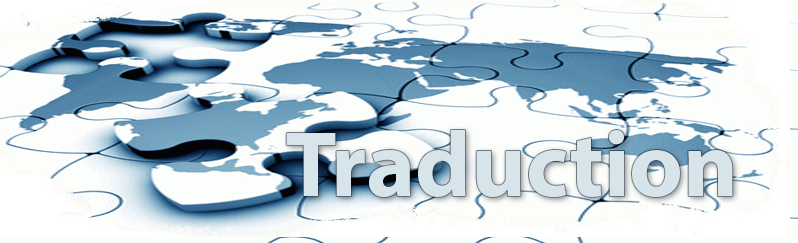
<style>
.page{position:relative;width:798px;height:243px;background:#fcfefc}
.page>*{position:absolute;margin:0}
.t1{font:93.7px "MyriadPro-Bold";color:#d7e5eb}
</style>
<div class="page">
<p class="t1" style="left:286px;top:130px;width:447px;height:67px">Traduction</p>
</div>
